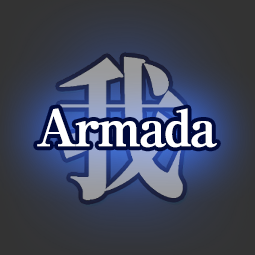
<style>
.page{position:relative;width:255px;height:255px}
.page>*{position:absolute;margin:0}
.t1{font:50px "RyuminPro-ExBold";letter-spacing:-0.08em;color:#ffffff;font-weight:bold}
</style>
<div class="page">
<p class="t1" style="left:37px;top:108px;width:180px;height:40px">Armada</p>
</div>
